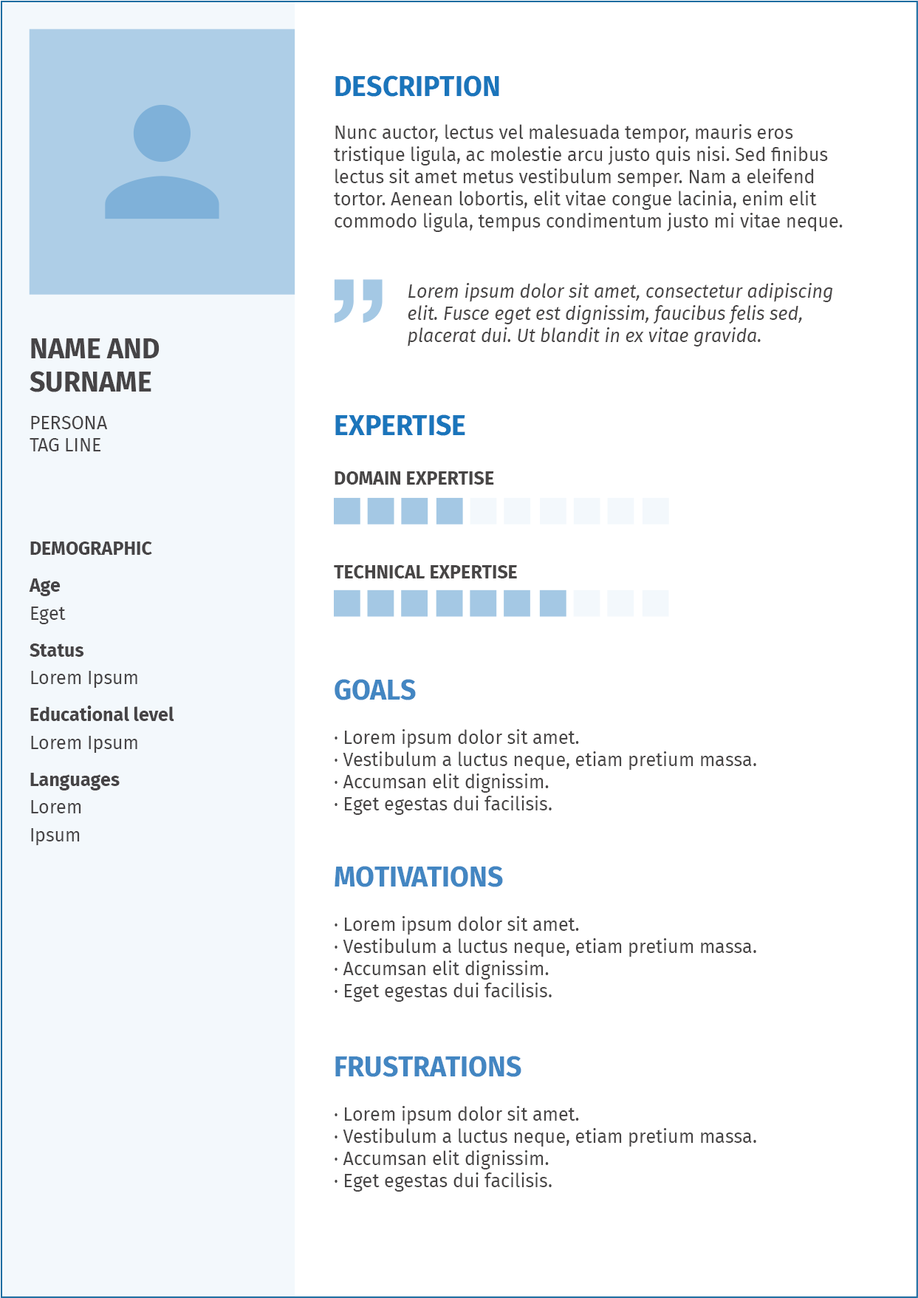
<style>
.page{position:relative;width:918px;height:1298px;background:#ffffff}
.page>*{position:absolute;margin:0}
.t1{font:27.7px "FiraSans-Bold";color:#1b75bb}
.t2{font:18.5px "FiraSans-Regular";color:#484646}
.t3{font:18.5px "FiraSans-Italic";color:#484646}
.t4{font:27.7px "FiraSans-Bold";color:#464446}
.t5{font:18.5px "FiraSans-Regular";color:#464446}
.t6{font:18.5px/36.9px "FiraSans-Bold";color:#464446}
.t7{font:18.5px/27.7px "FiraSans-Regular";color:#464446}
.t8{font:18.5px "FiraSans-Bold";color:#484646}
.t9{font:27.7px/36.9px "FiraSans-Bold";color:#484646}
.t10{font:18.5px "HelveticaNeue-Bold";color:#484646}
.t11{font:18.5px "FiraSans-Regular"}
.t12{font:27.7px/36.9px "FiraSans-Bold"}
.t13{font:18.5px "HelveticaNeue-Bold"}
</style>
<div class="page">
<p class="t1" style="left:335px;top:75px;width:165px;height:22px">DESCRIPTION</p>
<p class="t2" style="left:334px;top:124px;width:509px;height:108px">Nunc auctor, lectus vel malesuada tempor, mauris eros tristique ligula, ac molestie arcu justo quis nisi. Sed finibus lectus sit amet metus vestibulum semper. Nam a eleifend tortor. Aenean lobortis, elit vitae congue lacinia, enim elit commodo ligula, tempus condimentum justo mi vitae neque.</p>
<p class="t3" style="left:408px;top:283px;width:425px;height:64px">Lorem ipsum dolor sit amet, consectetur adipiscing elit. Fusce eget est dignissim, faucibus felis sed, placerat dui. Ut blandit in ex vitae gravida.</p>
<p class="t4" style="left:30px;top:338px;width:130px;height:54px">NAME AND <br>SURNAME</p>
<p class="t5" style="left:29px;top:416px;width:145px;height:430px">PERSONA <br>TAG LINE<br><br><br><br><span class="t6">DEMOGRAPHIC<br>Age<br></span><span class="t7">Eget<br></span><span class="t6">Status<br></span><span class="t7">Lorem Ipsum<br></span><span class="t6">Educational level<br></span><span class="t7">Lorem Ipsum<br></span><span class="t6">Languages<br></span><span class="t7">Lorem<br>Ipsum</span></p>
<p class="t1" style="left:335px;top:415px;width:131px;height:21px">EXPERTISE</p>
<p class="t8" style="left:335px;top:471px;width:159px;height:14px">DOMAIN EXPERTISE</p>
<p class="t8" style="left:334px;top:565px;width:183px;height:14px">TECHNICAL EXPERTISE</p>
<p class="t2" style="left:335px;top:679px;width:422px;height:136px"><span class="t9">GOALS<br></span><span class="t10"><br></span>· Lorem ipsum dolor sit amet.<br>· Vestibulum a luctus neque, etiam pretium massa.<br>· Accumsan elit dignissim.<br>· Eget egestas dui facilisis.</p>
<p class="t11" style="left:335px;top:866px;width:422px;height:136px"><span class="t12">MOTIVATIONS<br></span><span class="t13"><br></span>· Lorem ipsum dolor sit amet.<br>· Vestibulum a luctus neque, etiam pretium massa.<br>· Accumsan elit dignissim.<br>· Eget egestas dui facilisis.</p>
<p class="t11" style="left:335px;top:1056px;width:422px;height:136px"><span class="t12">FRUSTRATIONS<br></span><span class="t13"><br></span>· Lorem ipsum dolor sit amet.<br>· Vestibulum a luctus neque, etiam pretium massa.<br>· Accumsan elit dignissim.<br>· Eget egestas dui facilisis.</p>
</div>
